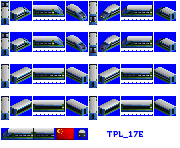
<style>
.page{position:relative;width:180px;height:148px;background:#ffffff}
.page>*{position:absolute;margin:0}
.t1{font:8px "Museo700-Regular";letter-spacing:0.075em;color:#0000ff;text-transform:uppercase}
</style>
<div class="page">
<p class="t1" style="left:107px;top:131px;width:36px;height:7px">TPL_17E</p>
</div>
